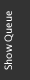
<style>
.page{position:relative;width:30px;height:80px;background:#333333}
.page>*{position:absolute;margin:0}
.t1{font:10px "LucidaGrande";color:#ffffff}
</style>
<div class="page">
<p class="t1" style="left:4px;top:11px;width:10px;height:59px;rotate:-90deg">Show Queue</p>
</div>
